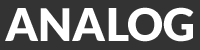
<style>
.page{position:relative;width:200px;height:50px;background:#333333}
.page>*{position:absolute;margin:0}
.t1{font:45px "Lato-Black";color:#ffffff}
</style>
<div class="page">
<p class="t1" style="left:5px;top:7px;width:189px;height:35px">ANALOG</p>
</div>
